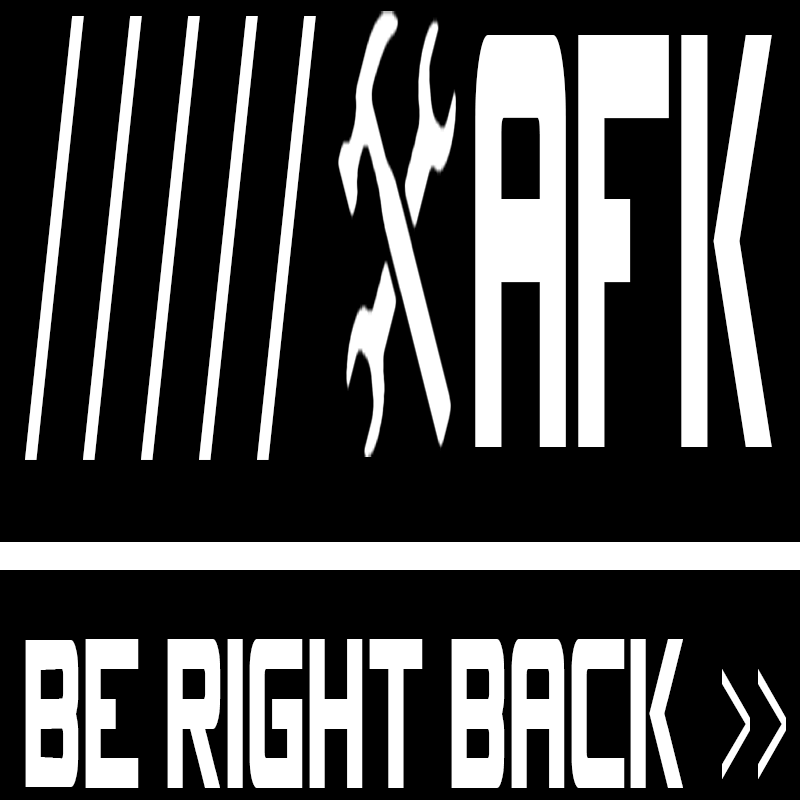
<style>
.page{position:relative;width:800px;height:800px;background:#000000}
.page>*{position:absolute;margin:0}
.t1{font:612.3px "MyriadPro-Regular";color:#ffffff;scale:0.28 1}
.t2{font:658.3px "SpaceMarineNominal";color:#ffffff;scale:0.16 1}
.t3{font:238.4px "SpaceMarineNominal";color:#ffffff;scale:0.25 1}
.t4{font:206.5px "MyriadPro-Regular";color:#ffffff;scale:0.29 1}
</style>
<div class="page">
<p class="t1" style="left:25px;top:16px;width:291px;height:444px">/////</p>
<p class="t2" style="left:475px;top:35px;width:297px;height:412px">AFK</p>
<p class="t3" style="left:25px;top:639px;width:658px;height:149px">Be right back</p>
<p class="t4" style="left:722px;top:669px;width:64px;height:110px">&gt;&gt;</p>
</div>
